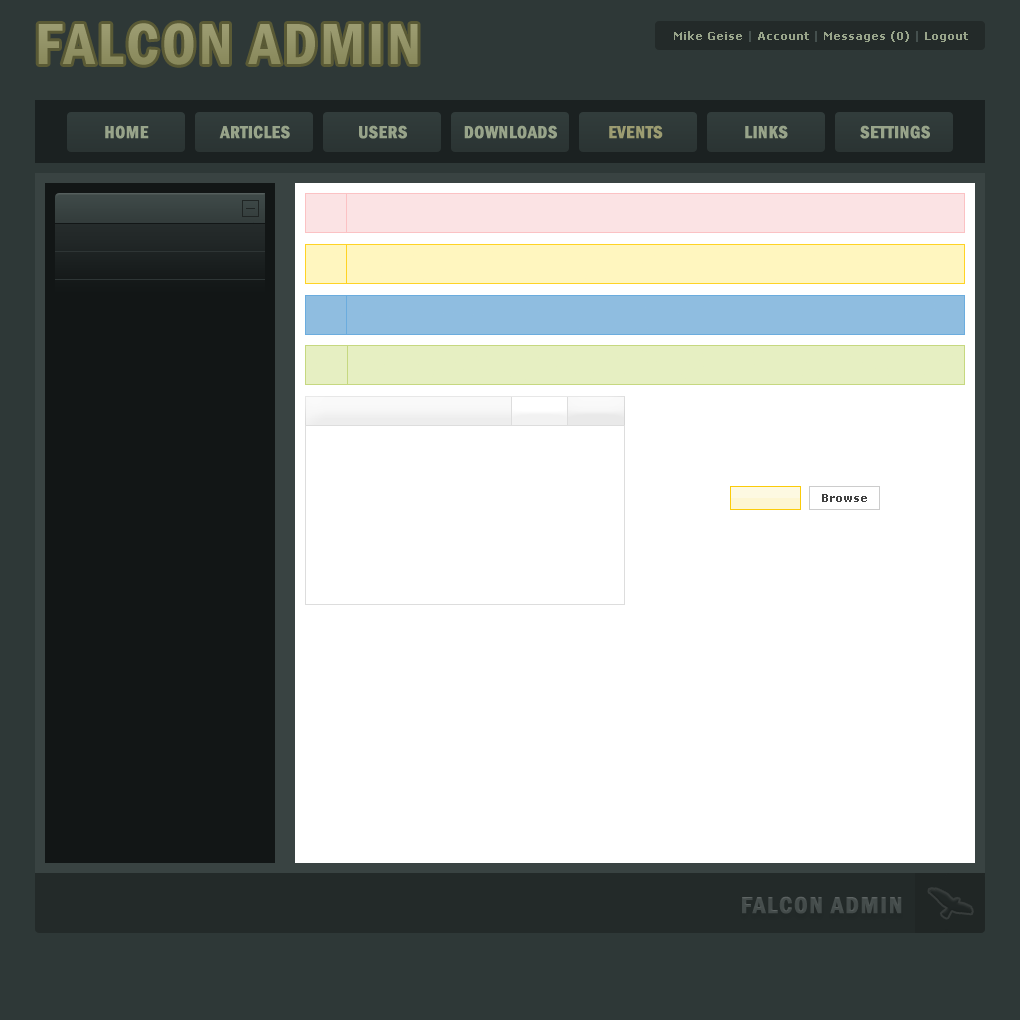
<style>
.page{position:relative;width:1020px;height:1020px;background:#ffffff}
.page>*{position:absolute;margin:0}
.t1{font:60px "FranklinGothic-DemiCond";letter-spacing:0.05em;color:#929267}
.t2{font:11px "Verdana-Bold";color:#98a48a}
.t3{font:11px "Verdana-Bold";color:#45504e}
.t4{font:18px "FranklinGothic-DemiCond";color:#98a48a;text-transform:uppercase;font-weight:bold}
.t5{font:18px "FranklinGothic-DemiCond";color:#9c9c71;text-transform:uppercase;font-weight:bold}
.t6{font:11px "Verdana-Bold";color:#414141}
.t7{font:24px "FranklinGothic-DemiCond";letter-spacing:0.05em;color:#464e4d;text-transform:uppercase;font-weight:bold}
</style>
<div class="page">
<p class="t1" style="left:38px;top:23px;width:380px;height:42px">FALCON ADMIN</p>
<p class="t2" style="left:674px;top:31px;width:294px;height:11px">Mike Geise <span class="t3">| </span>Account <span class="t3">| </span>Messages (0) <span class="t3">| </span>Logout</p>
<p class="t4" style="left:105px;top:125px;width:44px;height:14px">home</p>
<p class="t4" style="left:219px;top:125px;width:71px;height:14px">articles</p>
<p class="t4" style="left:359px;top:125px;width:48px;height:14px">users</p>
<p class="t4" style="left:464px;top:125px;width:93px;height:14px">downloads</p>
<p class="t5" style="left:609px;top:125px;width:54px;height:14px">events</p>
<p class="t4" style="left:745px;top:125px;width:43px;height:14px">links</p>
<p class="t4" style="left:860px;top:125px;width:70px;height:14px">settings</p>
<p class="t6" style="left:822px;top:494px;width:45px;height:8px">Browse</p>
<p class="t7" style="left:742px;top:896px;width:160px;height:18px">falcon admin</p>
</div>
